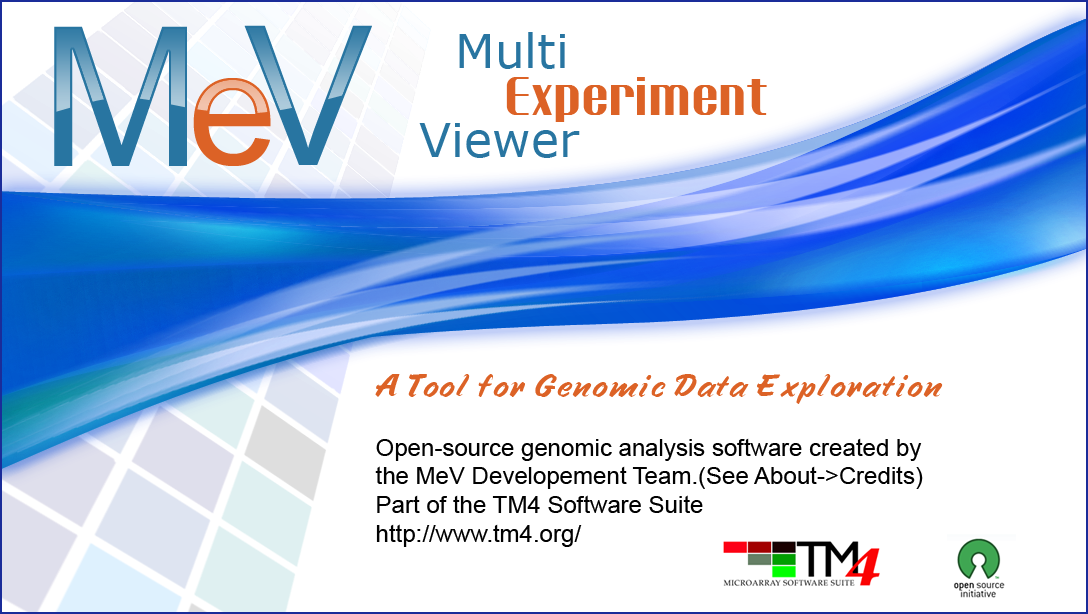
<style>
.page{position:relative;width:1088px;height:614px;background:#ffffff}
.page>*{position:absolute;margin:0}
.t1{font:193.9px "ArialMT";color:#2875a1}
.t2{font:46.7px "Verdana";color:#2875a1}
.t3{font:159.9px "ArialMT";color:#dc6226}
.t4{font:53.5px "PtarmiganCondensed";color:#dc6226}
.t5{font:47.1px "Verdana";color:#2875a1}
.t6{font:33.6px "Speedline";color:#dc6226;scale:1.1 1}
.t7{font:24px "ArialMT";color:#010101}
</style>
<div class="page">
<p class="t1" style="left:54px;top:26px;width:133px;height:140px">M</p>
<p class="t1" style="left:244px;top:25px;width:128px;height:140px">V</p>
<p class="t2" style="left:459px;top:32px;width:106px;height:37px">Multi</p>
<p class="t3" style="left:193px;top:78px;width:78px;height:88px">e</p>
<p class="t4" style="left:506px;top:77px;width:261px;height:45px">Experiment</p>
<p class="t5" style="left:419px;top:123px;width:161px;height:35px">Viewer</p>
<p class="t6" style="left:375px;top:374px;width:568px;height:30px">A Tool for Genomic Data Exploration</p>
<p class="t7" style="left:375px;top:438px;width:548px;height:109px">Open-source genomic analysis software created by <br>the MeV Developement Team.(See About-&gt;Credits)<br>Part of the TM4 Software Suite <br>http://www.tm4.org/</p>
</div>
